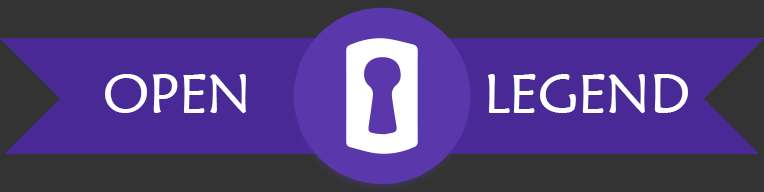
<style>
.page{position:relative;width:764px;height:192px;background:#333333}
.page>*{position:absolute;margin:0}
.t1{font:55px "MaiandraGD-Regular";color:#ffffff}
</style>
<div class="page">
<p class="t1" style="left:105px;top:74px;width:141px;height:40px">OPEN</p>
<p class="t1" style="left:487px;top:74px;width:201px;height:40px">LEGEND</p>
</div>
